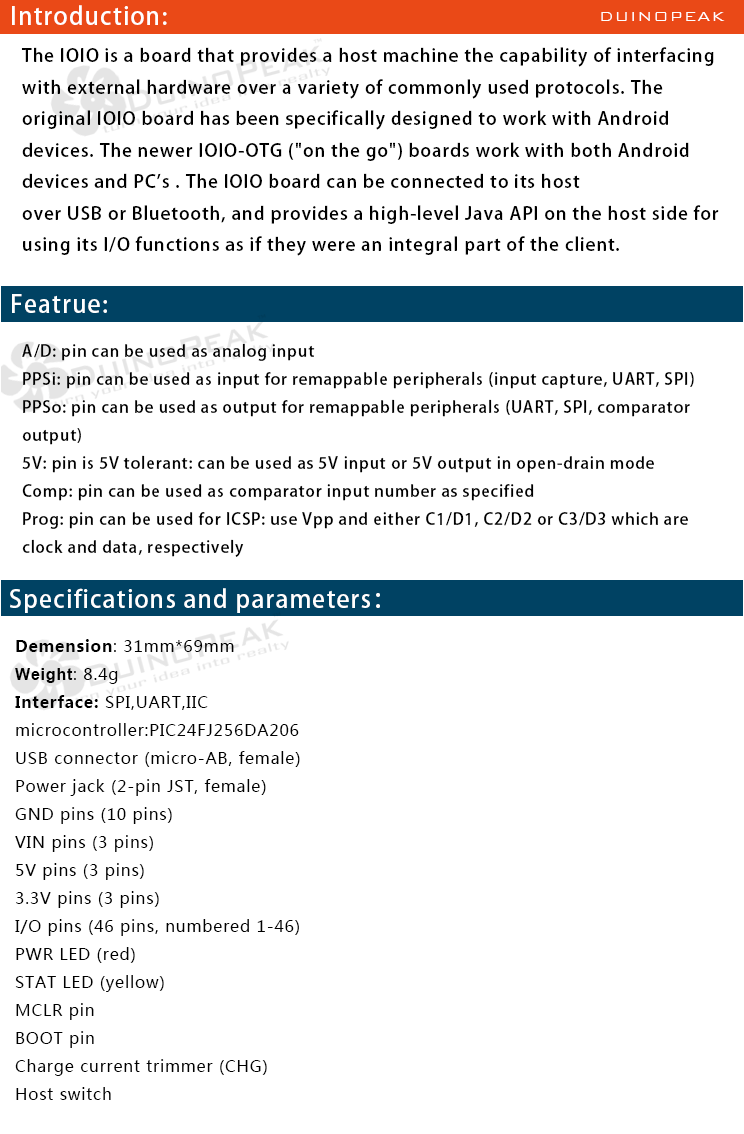
<style>
.page{position:relative;width:744px;height:1134px;background:#ffffff}
.page>*{position:absolute;margin:0}
.t1{font:24px "AdobeHeitiStd-Regular";letter-spacing:0.05em;color:#ffffff}
.t2{font:18px "BankGothicBT-Light";letter-spacing:0.05em;color:#ffffff}
.t3{font:18px "AdobeHeitiStd-Regular";letter-spacing:0.05em;color:#000000}
.t4{font:16px "AdobeHeitiStd-Regular";letter-spacing:0.05em;color:#000000}
.t5{font:16px "MicrosoftYaHei";letter-spacing:0.05em;color:#000000}
.t6{font:16px "MicrosoftYaHei-Bold";letter-spacing:0.05em;color:#000000}
.t7{font:16px "Arial-BoldMT";letter-spacing:0.05em;color:#000000}
</style>
<div class="page">
<p class="t1" style="left:12px;top:5px;width:155px;height:20px">Introduction:</p>
<p class="t2" style="left:601px;top:12px;width:124px;height:9px">DUINOPEAK</p>
<p class="t3" style="left:21px;top:47px;width:698px;height:209px">The IOIO is a board that provides a host machine the capability of interfacing <br>with external hardware over a variety of commonly used protocols. The <br>original IOIO board has been specifically designed to work with Android <br>devices. The newer IOIO-OTG ("on the go") boards work with both Android <br>devices and PC's . The IOIO board can be connected to its host <br>over USB or Bluetooth, and provides a high-level Java API on the host side for <br>using its I/O functions as if they were an integral part of the client.</p>
<p class="t1" style="left:12px;top:294px;width:95px;height:19px">Featrue:</p>
<p class="t4" style="left:22px;top:343px;width:672px;height:214px">A/D: pin can be used as analog input<br>PPSi: pin can be used as input for remappable peripherals (input capture, UART, SPI)<br>PPSo: pin can be used as output for remappable peripherals (UART, SPI, comparator <br>output)<br>5V: pin is 5V tolerant: can be used as 5V input or 5V output in open-drain mode<br>Comp: pin can be used as comparator input number as specified<br>Prog: pin can be used for ICSP: use Vpp and either C1/D1, C2/D2 or C3/D3 which are <br>clock and data, respectively</p>
<p class="t1" style="left:10px;top:588px;width:370px;height:25px">Specifications and parameters：</p>
<p class="t5" style="left:15px;top:639px;width:285px;height:461px"><span class="t6">Demension</span>: 31mm*69mm<br><span class="t7">Weight</span>: 8.4g<br><span class="t6">Interface: </span>SPI,UART,IIC<br>microcontroller:PIC24FJ256DA206<br>USB connector (micro-AB, female)<br>Power jack (2-pin JST, female)<br>GND pins (10 pins)<br>VIN pins (3 pins)<br>5V pins (3 pins)<br>3.3V pins (3 pins)<br>I/O pins (46 pins, numbered 1-46)<br>PWR LED (red)<br>STAT LED (yellow)<br>MCLR pin<br>BOOT pin<br>Charge current trimmer (CHG)<br>Host switch</p>
</div>
